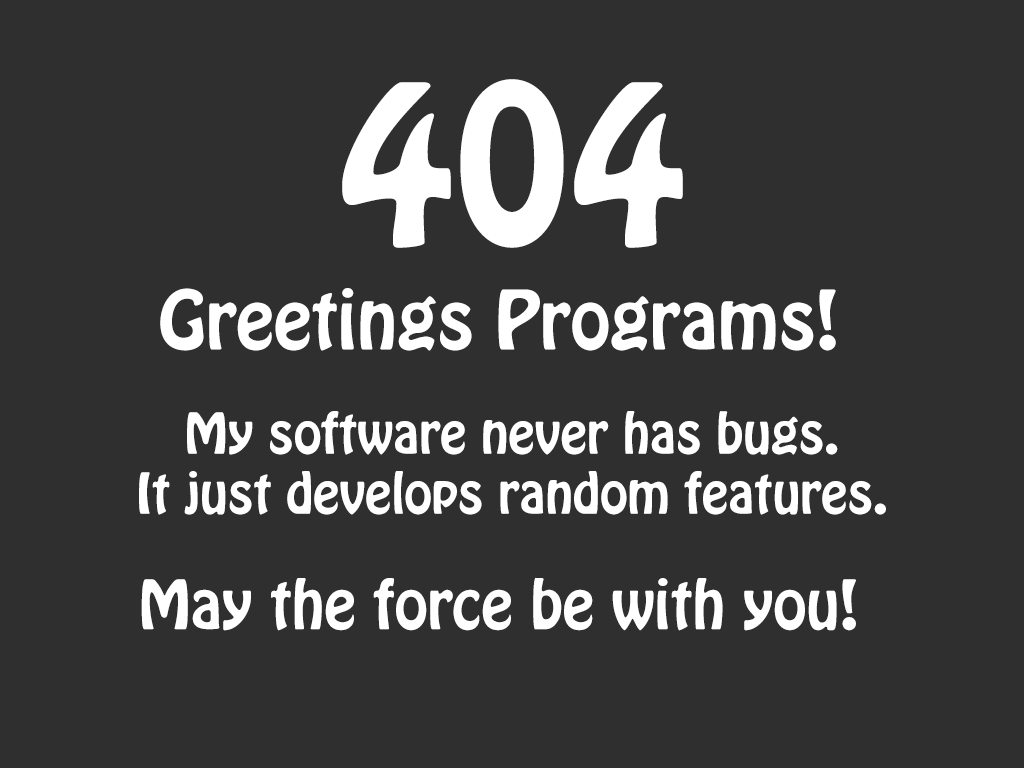
<style>
.page{position:relative;width:1024px;height:768px;background:#2f2f2f}
.page>*{position:absolute;margin:0}
.t1{font:200px "HoboStd";color:#ffffff}
.t2{font:72px "HoboStd";color:#ffffff}
.t3{font:50px "HoboStd";color:#ffffff}
.t4{font:60px "HoboStd";color:#ffffff}
</style>
<div class="page">
<p class="t1" style="left:342px;top:79px;width:341px;height:169px">404</p>
<p class="t2" style="left:160px;top:288px;width:676px;height:63px">Greetings Programs!</p>
<p class="t3" style="left:139px;top:411px;width:747px;height:104px;text-align:center">My software never has bugs. <br>It just develops random features.</p>
<p class="t4" style="left:141px;top:577px;width:715px;height:54px">May the force be with you!</p>
</div>
